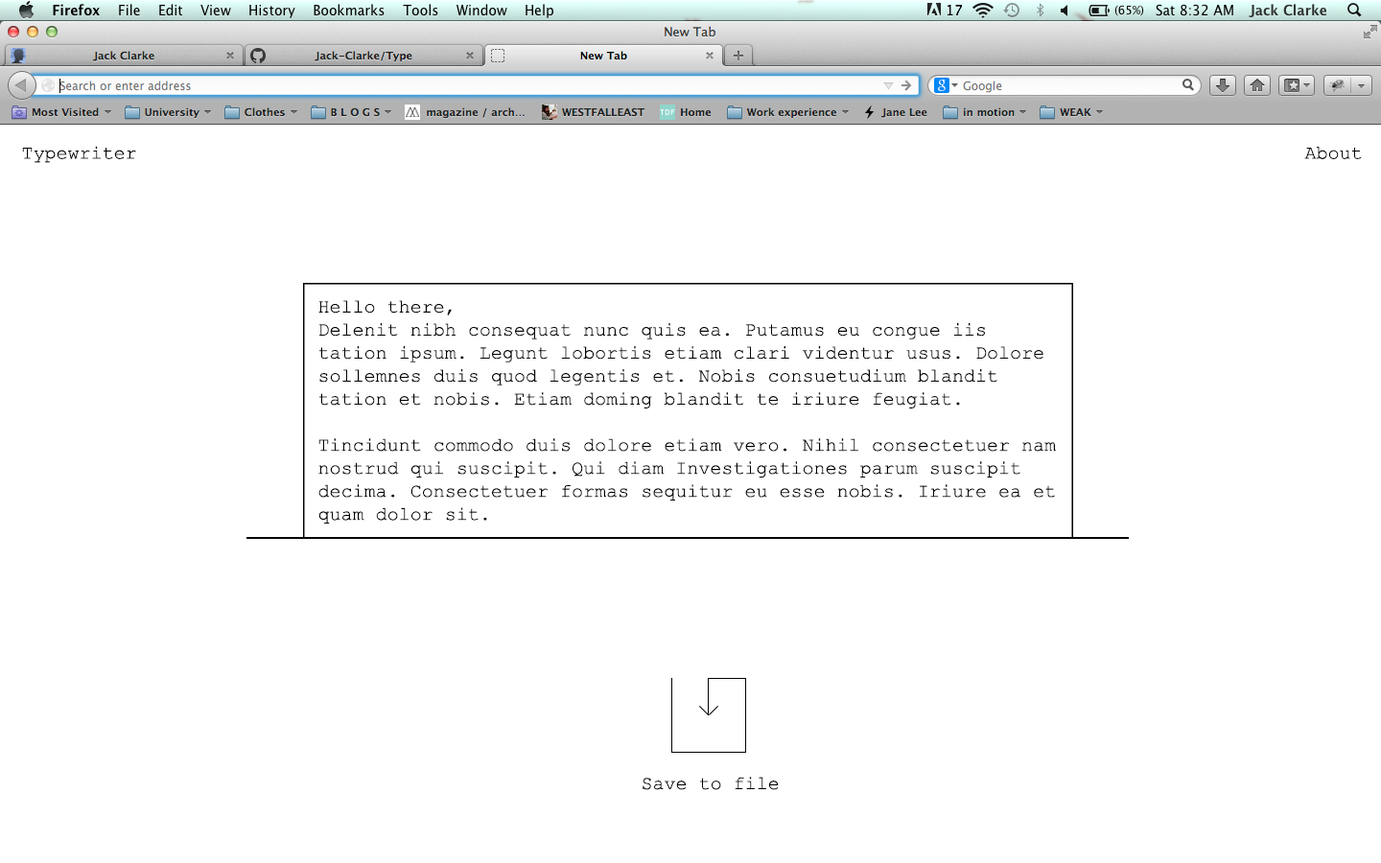
<style>
.page{position:relative;width:1381px;height:863px;background:#ffffff}
.page>*{position:absolute;margin:0}
.t1{font:19.2px "CourierNewPSMT";color:#000000}
.t2{font:19.2px/76.8px "CourierNewPSMT";color:#000000}
</style>
<div class="page">
<p class="t1" style="left:22px;top:146px;width:114px;height:17px">Typewriter</p>
<p class="t1" style="left:1305px;top:147px;width:57px;height:12px">About</p>
<p class="t1" style="left:318px;top:300px;width:739px;height:224px"><span class="t2">Hello there,</span><br>Delenit nibh consequat nunc quis ea. Putamus eu congue iis tation ipsum. Legunt lobortis etiam clari videntur usus. Dolore sollemnes duis quod legentis et. Nobis consuetudium blandit tation et nobis. Etiam doming blandit te iriure feugiat. <br><br>Tincidunt commodo duis dolore etiam vero. Nihil consectetuer nam nostrud qui suscipit. Qui diam Investigationes parum suscipit decima. Consectetuer formas sequitur eu esse nobis. Iriure ea et quam dolor sit.</p>
<p class="t1" style="left:643px;top:777px;width:136px;height:13px">Save to file</p>
</div>
